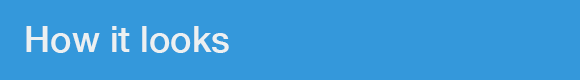
<style>
.page{position:relative;width:580px;height:80px;background:#3498db}
.page>*{position:absolute;margin:0}
.t1{font:36px "HelveticaNeue-Medium";color:#ecf0f1}
</style>
<div class="page">
<p class="t1" style="left:26px;top:26px;width:203px;height:27px">How it looks</p>
</div>
